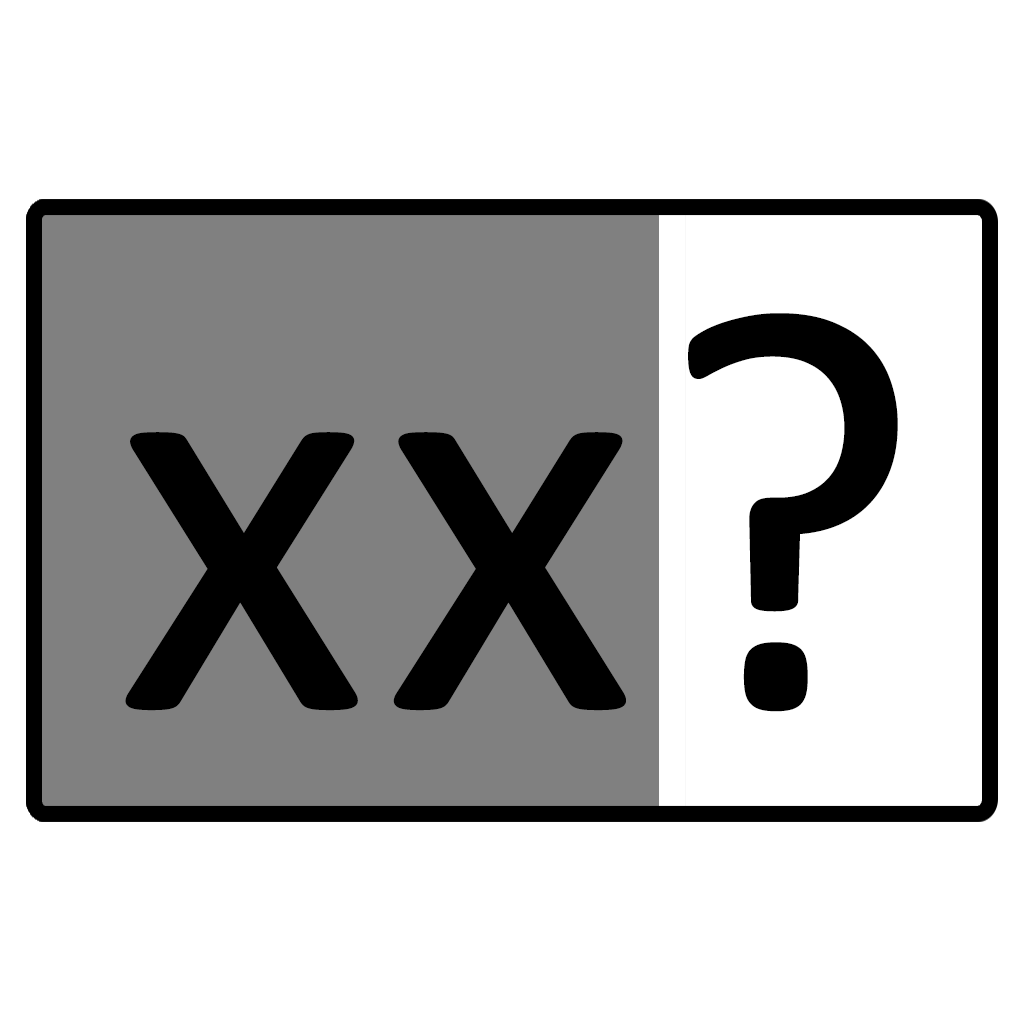
<style>
.page{position:relative;width:1024px;height:1024px;background:#ffffff}
.page>*{position:absolute;margin:0}
.t1{font:583px "Calibri";color:#000000;font-weight:bold}
</style>
<div class="page">
<p class="t1" style="left:125px;top:313px;width:773px;height:399px">xx?</p>
</div>
